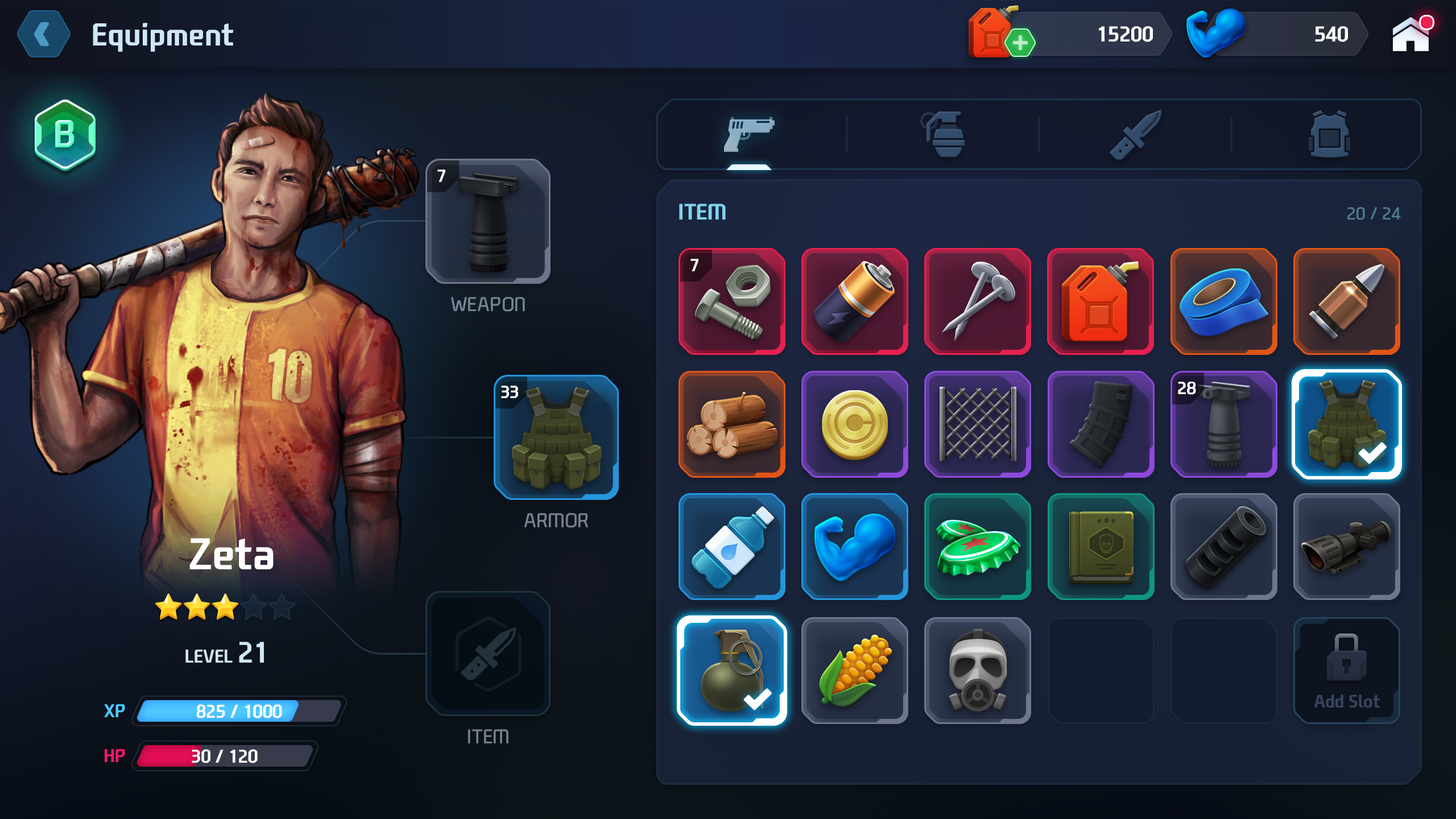
<style>
.page{position:relative;width:1456px;height:819px}
.page>*{position:absolute;margin:0}
.t1{font:30.6px "NEXONFootballGothicB";color:#cfe7f7}
.t2{font:20.7px "NEXONFootballGothicB";color:#ffffff;text-transform:uppercase}
.t3{font:37.5px "NEXONFootballGothicB";letter-spacing:-0.02em;text-transform:uppercase}
.t4{font:17.1px "NEXONFootballGothicB";color:#ffffff}
.t5{font:21.6px "NEXONFootballGothicB";color:#7fd4f0;text-transform:uppercase}
.t6{font:17.1px "NEXONFootballGothicL";color:#4c7d94}
.t7{font:19.3px "NEXONFootballGothicL";color:#758591;text-transform:uppercase}
.t8{font:19.3px "NEXONFootballGothicL";color:#75848f;text-transform:uppercase}
.t9{font:42.7px "NEXONFootballGothicB";color:#ffffff}
.t10{font:17.9px "NEXONFootballGothicB";color:#cfe7f7;text-transform:uppercase}
.t11{font:28.4px "NEXONFootballGothicB";color:#cfe7f7}
.t12{font:17.4px "NEXONFootballGothicB";color:#39455f}
.t13{font:17.9px "NEXONFootballGothicB";color:#4fc9fe;text-transform:uppercase}
.t14{font:17.9px "NEXONFootballGothicB";color:#ffffff}
.t15{font:19.3px "NEXONFootballGothicL";color:#74838e;text-transform:uppercase}
.t16{font:17.9px "NEXONFootballGothicB";color:#ff1768}
</style>
<div class="page">
<p class="t1" style="left:93px;top:23px;width:141px;height:29px">Equipment</p>
<p class="t2" style="left:1099px;top:26px;width:54px;height:16px">15200</p>
<p class="t2" style="left:1315px;top:26px;width:33px;height:16px">540</p>
<p class="t3" style="left:55px;top:120px;width:20px;height:27px">B</p>
<p class="t4" style="left:437px;top:169px;width:8px;height:13px">7</p>
<p class="t5" style="left:679px;top:204px;width:47px;height:16px">Item</p>
<p class="t6" style="left:1347px;top:207px;width:54px;height:13px">20 / 24</p>
<p class="t4" style="left:690px;top:259px;width:8px;height:12px">7</p>
<p class="t7" style="left:451px;top:297px;width:74px;height:15px">Weapon</p>
<p class="t4" style="left:501px;top:386px;width:17px;height:12px">33</p>
<p class="t4" style="left:1178px;top:382px;width:18px;height:13px">28</p>
<p class="t8" style="left:524px;top:513px;width:64px;height:15px">Armor</p>
<p class="t9" style="left:189px;top:538px;width:85px;height:31px">Zeta</p>
<p class="t10" style="left:185px;top:642px;width:79px;height:21px">Level <span class="t11">21</span></p>
<p class="t12" style="left:1314px;top:694px;width:66px;height:14px">Add Slot</p>
<p class="t13" style="left:104px;top:704px;width:21px;height:13px">xp</p>
<p class="t14" style="left:196px;top:704px;width:86px;height:14px">825 / 1000</p>
<p class="t15" style="left:468px;top:729px;width:40px;height:14px">Item</p>
<p class="t16" style="left:105px;top:749px;width:20px;height:13px">HP</p>
<p class="t14" style="left:192px;top:749px;width:66px;height:14px">30 / 120</p>
</div>
